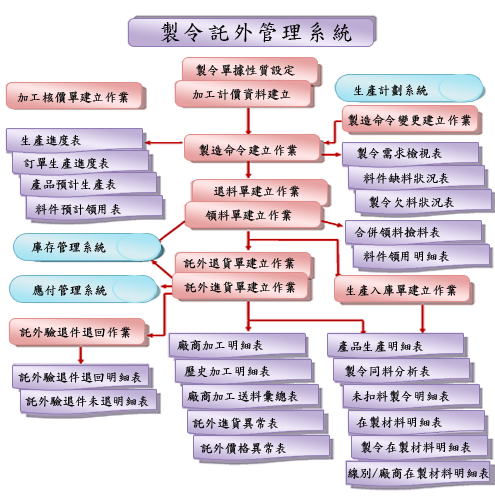
<style>
.page{position:relative;width:495px;height:500px;background:#ffffff}
.page>*{position:absolute;margin:0}
.t1{font:22.2px "DFKaiShu-SB-Estd-BF";letter-spacing:0.1em;color:#010101}
.t2{font:12.5px "DFKaiShu-SB-Estd-BF";color:#010101}
</style>
<div class="page">
<p class="t1" style="left:161px;top:22px;width:191px;height:21px">製令託外管理系統</p>
<p class="t2" style="left:196px;top:64px;width:99px;height:13px">製令單據性質設定</p>
<p class="t2" style="left:192px;top:88px;width:99px;height:12px">加工計價資料建立</p>
<p class="t2" style="left:353px;top:84px;width:75px;height:12px">生產計劃系統</p>
<p class="t2" style="left:17px;top:91px;width:112px;height:12px">加工核價單建立作業</p>
<p class="t2" style="left:348px;top:114px;width:123px;height:13px">製造命令變更建立作業</p>
<p class="t2" style="left:20px;top:134px;width:61px;height:12px">生產進度表</p>
<p class="t2" style="left:199px;top:144px;width:98px;height:13px">製造命令建立作業</p>
<p class="t2" style="left:357px;top:147px;width:85px;height:13px">製令需求檢視表</p>
<p class="t2" style="left:23px;top:157px;width:86px;height:13px">訂單生產進度表</p>
<p class="t2" style="left:363px;top:173px;width:86px;height:11px">料件缺料狀況表</p>
<p class="t2" style="left:30px;top:178px;width:86px;height:12px">產品預計生產表</p>
<p class="t2" style="left:214px;top:185px;width:86px;height:12px">退料單建立作業</p>
<p class="t2" style="left:369px;top:196px;width:85px;height:13px">製令欠料狀況表</p>
<p class="t2" style="left:35px;top:204px;width:86px;height:11px">料件預計領用表</p>
<p class="t2" style="left:205px;top:209px;width:87px;height:12px">領料單建立作業</p>
<p class="t2" style="left:354px;top:227px;width:86px;height:11px">合併領料撿料表</p>
<p class="t2" style="left:31px;top:241px;width:75px;height:12px">庫存管理系統</p>
<p class="t2" style="left:183px;top:257px;width:112px;height:12px">託外退貨單建立作業</p>
<p class="t2" style="left:363px;top:251px;width:86px;height:11px">料件領用明細表</p>
<p class="t2" style="left:184px;top:281px;width:112px;height:12px">託外進貨單建立作業</p>
<p class="t2" style="left:32px;top:284px;width:75px;height:12px">應付管理系統</p>
<p class="t2" style="left:345px;top:284px;width:112px;height:12px">生產入庫單建立作業</p>
<p class="t2" style="left:19px;top:326px;width:112px;height:12px">託外驗退件退回作業</p>
<p class="t2" style="left:177px;top:339px;width:86px;height:12px">廠商加工明細表</p>
<p class="t2" style="left:337px;top:340px;width:86px;height:12px">產品生產明細表</p>
<p class="t2" style="left:184px;top:366px;width:86px;height:11px">歷史加工明細表</p>
<p class="t2" style="left:345px;top:365px;width:85px;height:13px">製令同料分析表</p>
<p class="t2" style="left:18px;top:372px;width:124px;height:11px">託外驗退件退回明細表</p>
<p class="t2" style="left:187px;top:390px;width:111px;height:12px">廠商加工送料彙總表</p>
<p class="t2" style="left:352px;top:390px;width:98px;height:13px">未扣料製令明細表</p>
<p class="t2" style="left:25px;top:396px;width:124px;height:11px">託外驗退件未退明細表</p>
<p class="t2" style="left:192px;top:417px;width:86px;height:12px">託外進貨異常表</p>
<p class="t2" style="left:356px;top:416px;width:86px;height:13px">在製材料明細表</p>
<p class="t2" style="left:200px;top:442px;width:86px;height:12px">託外價格異常表</p>
<p class="t2" style="left:361px;top:441px;width:110px;height:13px">製令在製材料明細表</p>
<p class="t2" style="left:348px;top:467px;width:141px;height:13px">線別/廠商在製材料明細表</p>
</div>
